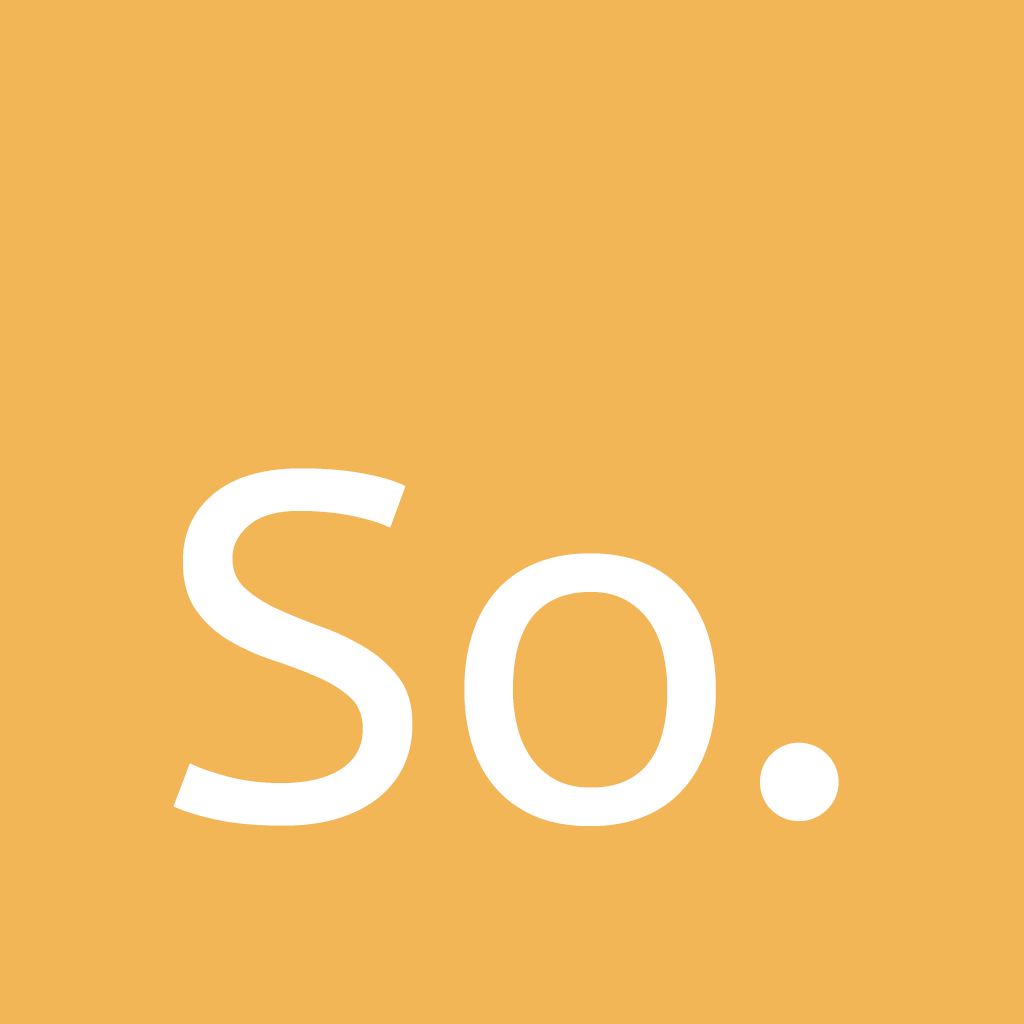
<style>
.page{position:relative;width:1024px;height:1024px;background:#f3b656}
.page>*{position:absolute;margin:0}
.t1{font:491.7px "PTSans-Caption";color:#ffffff}
.t2{font:614.6px "PTSans-Caption";color:#ffffff}
.t3{font:491.7px "Lobster-Regular";color:#ffffff}
</style>
<div class="page">
<p class="t1" style="left:173px;top:468px;width:666px;height:358px"><span class="t2"><br></span>So<span class="t3">.</span></p>
</div>
